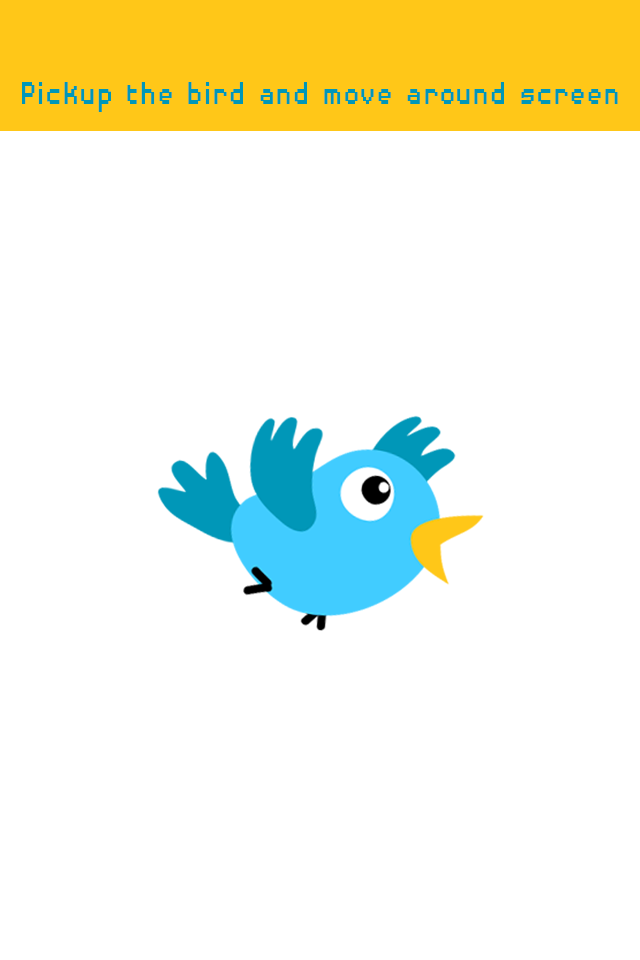
<style>
.page{position:relative;width:640px;height:960px;background:#ffffff}
.page>*{position:absolute;margin:0}
.t1{font:42.3px "DisposableDroidBB";color:#0097b8;scale:0.83 1}
</style>
<div class="page">
<p class="t1" style="left:22px;top:82px;width:596px;height:30px">Pickup the bird and move around screen</p>
</div>
